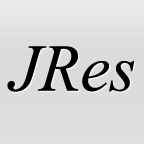
<style>
.page{position:relative;width:144px;height:144px}
.page>*{position:absolute;margin:0}
.t1{font:82.9px "Vijaya";color:#000000}
</style>
<div class="page">
<p class="t1" style="left:7px;top:46px;width:128px;height:46px">JRes</p>
</div>
